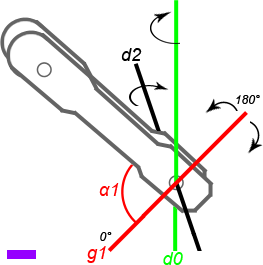
<style>
.page{position:relative;width:263px;height:265px;background:#ffffff}
.page>*{position:absolute;margin:0}
.t1{font:18px "Arial-ItalicMT";color:#000000}
.t2{font:12px "Arial-ItalicMT";color:#000000}
.t3{font:18px "Arial-ItalicMT";color:#ff0000}
.t4{font:18px "Arial-ItalicMT";color:#00ff00}
</style>
<div class="page">
<p class="t1" style="left:121px;top:48px;width:21px;height:13px">d2</p>
<p class="t2" style="left:236px;top:95px;width:24px;height:9px">180°</p>
<p class="t3" style="left:99px;top:183px;width:20px;height:13px">α1</p>
<p class="t2" style="left:100px;top:232px;width:12px;height:9px">0°</p>
<p class="t3" style="left:87px;top:246px;width:19px;height:17px">g1</p>
<p class="t4" style="left:163px;top:252px;width:20px;height:13px">d0</p>
</div>
